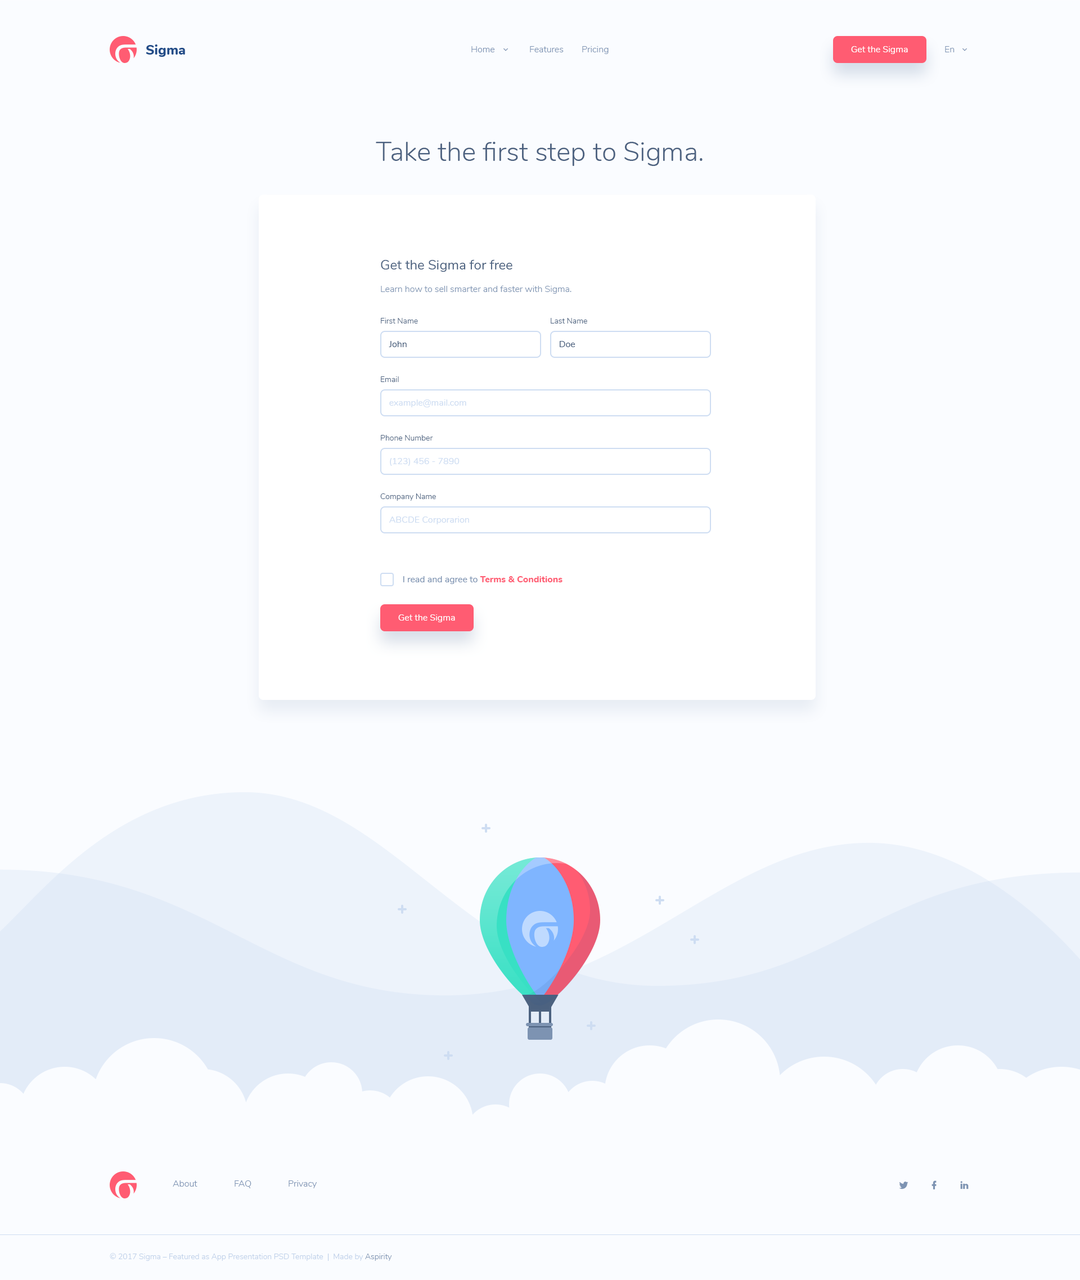
<style>
.page{position:relative;width:1080px;height:1280px;background:#fafcff}
.page>*{position:absolute;margin:0}
.t1{font:9px "Nunito-Light";color:#7d93b3}
.t2{font:9px "Nunito-Regular";color:#ffffff}
.t3{font:27px "Nunito-Light";color:#4d6280}
.t4{font:13.5px "Nunito-Regular";color:#4c6280}
.t5{font:9px "Nunito-Light";color:#7d93b2}
.t6{font:7.9px "Nunito-Light";color:#4c6280}
.t7{font:9px "Nunito-Regular";color:#4c6280}
.t8{font:9px "Nunito-Regular";color:#ceddf2}
.t9{font:9px "Nunito-Regular";color:#7d93b2}
.t10{font:9px "Nunito-ExtraBold";color:#ff5c72}
.t11{font:7.9px "Nunito-Light";color:#bed0e9}
.t12{font:7.9px "Nunito-Light";color:#7d93b2}
</style>
<div class="page">
<p class="t1" style="left:471px;top:46px;width:23px;height:6px">Home</p>
<p class="t1" style="left:530px;top:46px;width:34px;height:6px">Features</p>
<p class="t1" style="left:582px;top:46px;width:27px;height:8px">Pricing</p>
<p class="t2" style="left:851px;top:46px;width:57px;height:8px">Get the Sigma</p>
<p class="t1" style="left:945px;top:46px;width:10px;height:6px">En</p>
<p class="t3" style="left:376px;top:142px;width:327px;height:24px">Take the first step to Sigma.</p>
<p class="t4" style="left:381px;top:259px;width:131px;height:13px">Get the Sigma for free</p>
<p class="t5" style="left:381px;top:285px;width:191px;height:9px">Learn how to sell smarter and faster with Sigma.</p>
<p class="t6" style="left:381px;top:318px;width:37px;height:5px">First Name</p>
<p class="t6" style="left:551px;top:318px;width:36px;height:5px">Last Name</p>
<p class="t7" style="left:389px;top:341px;width:18px;height:6px">John</p>
<p class="t7" style="left:560px;top:341px;width:15px;height:6px">Doe</p>
<p class="t6" style="left:381px;top:376px;width:18px;height:6px">Email</p>
<p class="t8" style="left:389px;top:399px;width:77px;height:8px">example@mail.com</p>
<p class="t6" style="left:381px;top:435px;width:52px;height:5px">Phone Number</p>
<p class="t8" style="left:390px;top:458px;width:70px;height:8px">(123) 456 - 7890</p>
<p class="t6" style="left:380px;top:493px;width:56px;height:8px">Company Name</p>
<p class="t8" style="left:389px;top:516px;width:80px;height:8px">ABCDE Corporarion</p>
<p class="t9" style="left:403px;top:576px;width:159px;height:8px">I read and agree to <span class="t10">Terms &amp; Conditions</span></p>
<p class="t2" style="left:398px;top:614px;width:57px;height:8px">Get the Sigma</p>
<p class="t1" style="left:173px;top:1180px;width:24px;height:6px">About</p>
<p class="t1" style="left:235px;top:1180px;width:16px;height:8px">FAQ</p>
<p class="t1" style="left:289px;top:1180px;width:28px;height:8px">Privacy</p>
<p class="t11" style="left:110px;top:1253px;width:282px;height:8px">© 2017 Sigma – Featured as App Presentation PSD Template  |  Made by <span class="t12">Aspirity</span></p>
</div>
